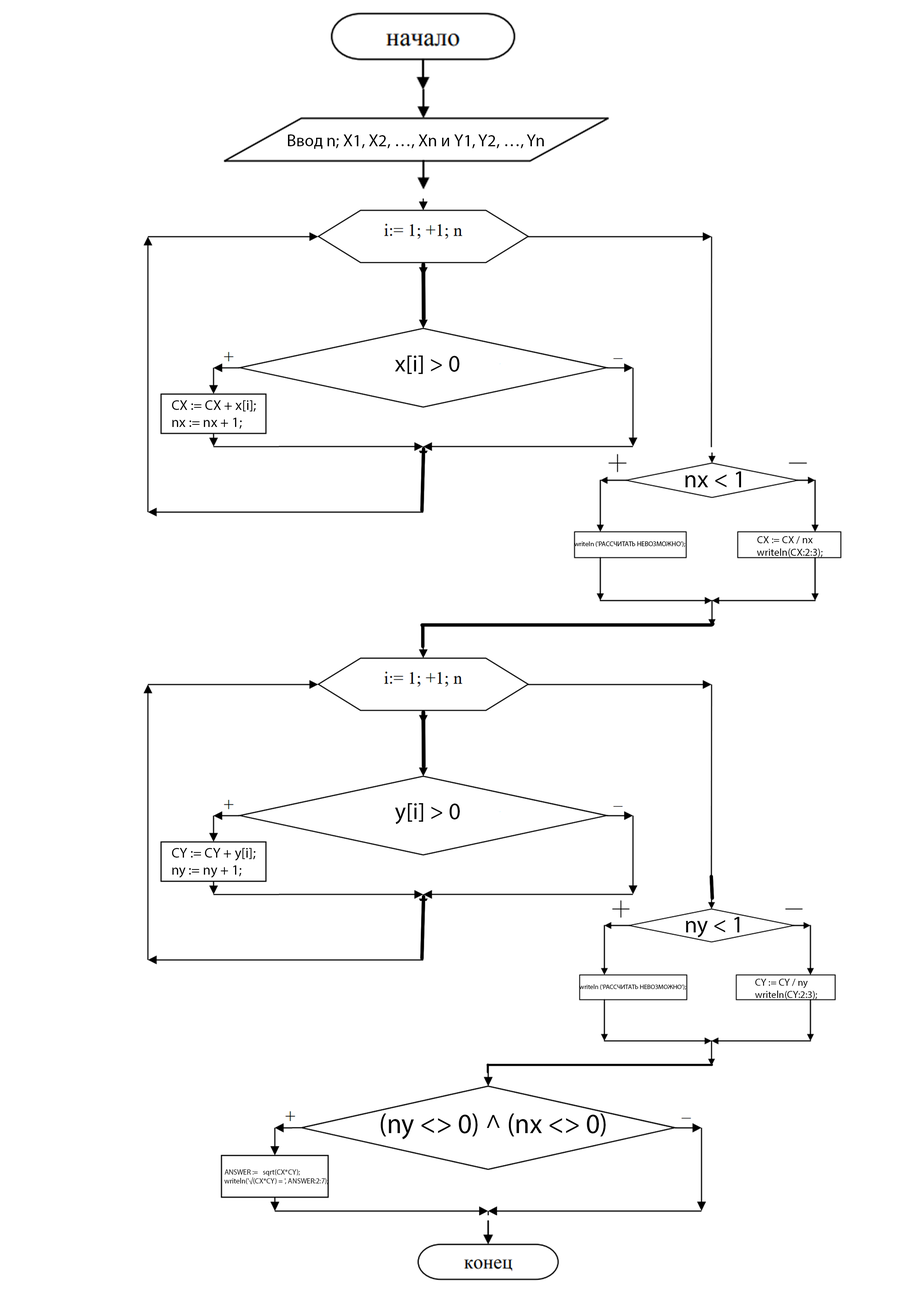
<style>
.page{position:relative;width:918px;height:1299px;background:#ffffff}
.page>*{position:absolute;margin:0}
.t1{font:17px "MyriadPro-Regular";color:#000000}
.t2{font:23.3px "MyriadPro-Regular";color:#000000}
.t3{font:14.1px "MyriadPro-Regular";color:#000000}
.t4{font:24.3px "MyriadPro-Regular";color:#000000}
.t5{font:6.8px "MyriadPro-Regular";color:#000000}
.t6{font:10.5px "MyriadPro-Regular";color:#000000}
.t7{font:6.5px "MyriadPro-Regular";color:#000000}
.t8{font:10.1px "MyriadPro-Regular";color:#000000}
.t9{font:28.1px "MyriadPro-Regular";color:#000000;scale:0.96 1}
.t10{font:7.5px "MyriadPro-Regular";color:#000000;scale:0.96 1}
</style>
<div class="page">
<p class="t1" style="left:288px;top:134px;width:256px;height:15px">Ввод n; X1, X2, …, Xn и Y1, Y2, …, Yn</p>
<p class="t2" style="left:395px;top:355px;width:64px;height:19px">x[i] &gt; 0</p>
<p class="t3" style="left:172px;top:400px;width:84px;height:29px">CX := CX + x[i];<br>nx := nx + 1;</p>
<p class="t4" style="left:685px;top:471px;width:56px;height:16px">nx &lt; 1</p>
<p class="t5" style="left:575px;top:541px;width:110px;height:6px">writeln ('РАССЧИТАТЬ НЕВОЗМОЖНО');</p>
<p class="t6" style="left:757px;top:536px;width:66px;height:21px">CX := CX / nx<br>writeln(CX:2:3);</p>
<p class="t2" style="left:395px;top:803px;width:65px;height:21px">y[i] &gt; 0</p>
<p class="t3" style="left:172px;top:848px;width:83px;height:29px">CY := CY + y[i];<br>ny := ny + 1;</p>
<p class="t2" style="left:686px;top:917px;width:54px;height:20px">ny &lt; 1</p>
<p class="t7" style="left:579px;top:984px;width:107px;height:6px">writeln ('РАССЧИТАТЬ НЕВОЗМОЖНО');</p>
<p class="t8" style="left:755px;top:978px;width:62px;height:21px">CY := CY / ny<br>writeln(CY:2:3);</p>
<p class="t9" style="left:381px;top:1113px;width:225px;height:26px">(ny &lt;&gt; 0) ^ (nx &lt;&gt; 0)</p>
<p class="t10" style="left:224px;top:1169px;width:104px;height:15px">ANSWER :=   sqrt(CX*CY);<br>writeln('√(CX*CY) = ', ANSWER:2:7);</p>
</div>
